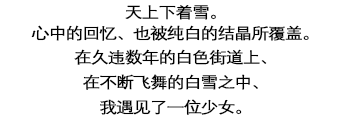
<style>
.page{position:relative;width:350px;height:120px;background:#ffffff}
.page>*{position:absolute;margin:0}
.t1{font:15.7px/24.7px "DengXian";letter-spacing:-0.08em;color:#000000;font-weight:bold;scale:1.14 1}
</style>
<div class="page">
<p class="t1" style="left:31px;top:5px;width:278px;height:110px;text-align:center">天上下着雪。<br>心中的回忆、也被纯白的结晶所覆盖。<br>在久违数年的白色街道上、<br>在不断飞舞的白雪之中、<br>我遇见了一位少女。</p>
</div>
